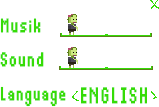
<style>
.page{position:relative;width:159px;height:107px;background:#ffffff}
.page>*{position:absolute;margin:0}
.t1{font:31px "Thintel";letter-spacing:0.075em;color:#35dc06;font-weight:bold;scale:0.69 1}
.t2{font:31.4px "Thintel";letter-spacing:0.075em;color:#35dc06;font-weight:bold;scale:0.69 1}
.t3{font:29.5px "Thintel";letter-spacing:0.075em;color:#35dc06;font-weight:bold;scale:0.69 1}
.t4{font:36px "Thintel";letter-spacing:0.075em;color:#35dc06;font-weight:bold;scale:0.69 1}
</style>
<div class="page">
<p class="t1" style="left:0px;top:18px;width:41px;height:15px">Musik</p>
<p class="t2" style="left:0px;top:52px;width:44px;height:15px">Sound</p>
<p class="t3" style="left:0px;top:86px;width:66px;height:21px">Language</p>
<p class="t4" style="left:81px;top:87px;width:66px;height:17px">ENGLISH</p>
</div>
